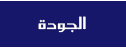
<style>
.page{position:relative;width:126px;height:48px;background:#16166b}
.page>*{position:absolute;margin:0}
.t1{font:20px "SC_KHALID";color:#ffffff;scale:1.07 1}
</style>
<div class="page">
<p class="t1" style="left:38px;top:16px;width:48px;height:17px">الجودة</p>
</div>
